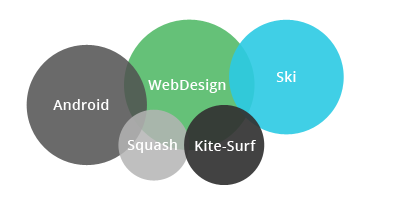
<style>
.page{position:relative;width:400px;height:200px;background:#ffffff}
.page>*{position:absolute;margin:0}
.t1{font:14px "OpenSans-Semibold";letter-spacing:0.02em;color:#ffffff}
</style>
<div class="page">
<p class="t1" style="left:276px;top:71px;width:20px;height:11px">Ski</p>
<p class="t1" style="left:148px;top:79px;width:78px;height:14px">WebDesign</p>
<p class="t1" style="left:53px;top:99px;width:56px;height:11px">Android</p>
<p class="t1" style="left:127px;top:139px;width:50px;height:14px">Squash</p>
<p class="t1" style="left:195px;top:140px;width:61px;height:11px">Kite-Surf</p>
</div>
